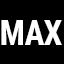
<style>
.page{position:relative;width:64px;height:64px;background:#000000}
.page>*{position:absolute;margin:0}
.t1{font:35px "Roboto-Black";color:#ffffff;scale:0.8 1}
</style>
<div class="page">
<p class="t1" style="left:1px;top:20px;width:61px;height:25px">MAX</p>
</div>
